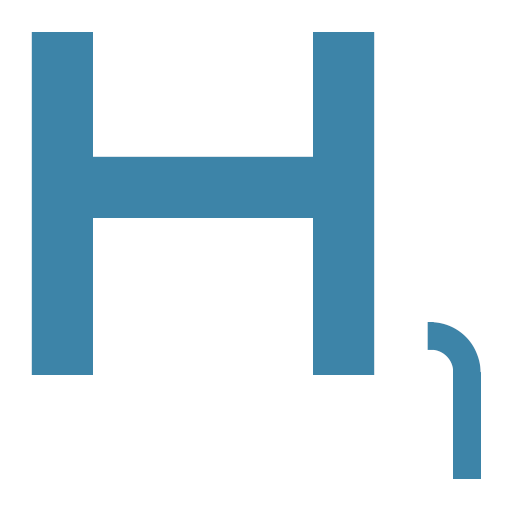
<style>
.page{position:relative;width:512px;height:512px;background:#ffffff}
.page>*{position:absolute;margin:0}
.t1{font:489.8px "AzonixRegular";color:#3d84a8}
.t2{font:224.3px "AzonixRegular";color:#3d84a8}
</style>
<div class="page">
<p class="t1" style="left:31px;top:32px;width:344px;height:343px">H</p>
<p class="t2" style="left:427px;top:322px;width:54px;height:157px">1</p>
</div>
